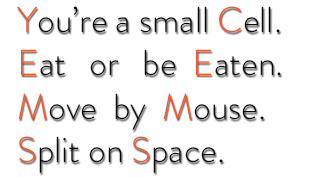
<style>
.page{position:relative;width:311px;height:177px;background:#ffffff}
.page>*{position:absolute;margin:0}
.t1{font:36px "BrandonGrotesque-Light";color:#070707}
.t2{font:36px "BrandonGrotesque-Light";color:#ff5521}
</style>
<div class="page">
<p class="t1" style="left:17px;top:6px;width:264px;height:167px"><span class="t2">Y</span>ou’re a small <span class="t2">C</span>ell.<br><span class="t2">E</span>at   or   be  <span class="t2">E</span>aten.<br><span class="t2">M</span>ove  by  <span class="t2">M</span>ouse.<br><span class="t2">S</span>plit on <span class="t2">S</span>pace.</p>
</div>
